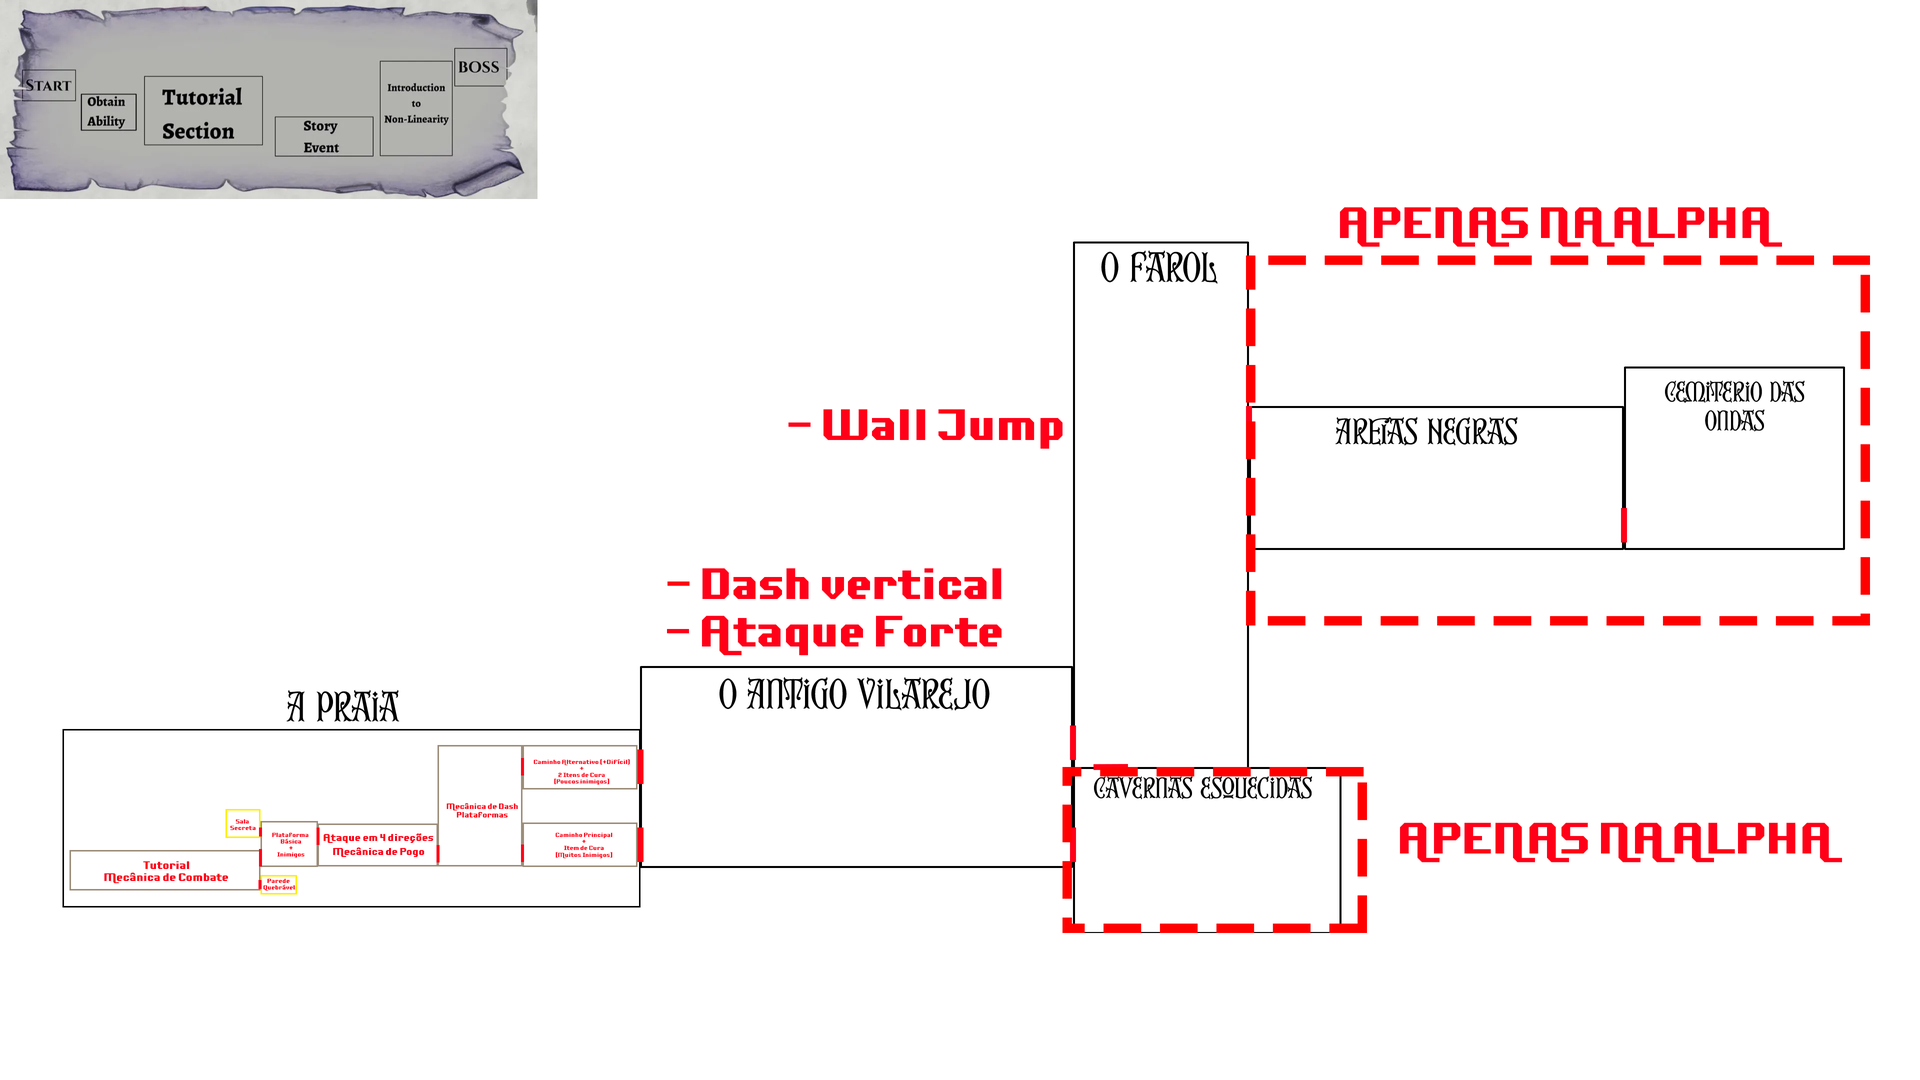
<style>
.page{position:relative;width:1920px;height:1080px;background:#ffffff}
.page>*{position:absolute;margin:0}
.t1{font:39.5px "Adventure-ReQuest";color:#ff0018}
.t2{font:5.5px "Adventure-ReQuest";color:#ff0018}
.t3{font:7px "Adventure-ReQuest";color:#ff0018}
.t4{font:9px "Adventure-ReQuest";color:#ff0018}
.t5{font:10px "Adventure-ReQuest";color:#ff0018}
</style>
<div class="page">
<p class="t1" style="left:1340px;top:207px;width:442px;height:40px">APENAS NA ALPHA</p>
<p class="t1" style="left:788px;top:409px;width:274px;height:40px">- Wall Jump</p>
<p class="t1" style="left:667px;top:568px;width:335px;height:88px;text-align:center">- Dash vertical<br>- Ataque Forte</p>
<p class="t2" style="left:534px;top:759px;width:96px;height:26px;text-align:center">Caminho Alternativo (+Difícil)<br>+<br>2 Itens de Cura<br>[Poucos inimigos]</p>
<p class="t3" style="left:446px;top:803px;width:72px;height:15px;text-align:center">Mecânica de Dash<br>Plataformas</p>
<p class="t2" style="left:230px;top:819px;width:26px;height:11px;text-align:center">Sala <br>Secreta</p>
<p class="t2" style="left:272px;top:832px;width:36px;height:26px;text-align:center">Plataforma <br>Básica<br>+<br>Inimigos</p>
<p class="t4" style="left:324px;top:834px;width:110px;height:9px">Ataque em 4 direções</p>
<p class="t2" style="left:556px;top:832px;width:56px;height:26px;text-align:center">Caminho Principal<br>+<br>Item de Cura<br>[Muitos Inimigos]</p>
<p class="t1" style="left:1400px;top:822px;width:442px;height:40px">APENAS NA ALPHA</p>
<p class="t4" style="left:333px;top:848px;width:91px;height:9px">Mecânica de Pogo</p>
<p class="t5" style="left:104px;top:861px;width:124px;height:23px;text-align:center">Tutorial<br>Mecânica de Combate</p>
<p class="t2" style="left:264px;top:878px;width:31px;height:13px;text-align:center">Parede <br>Quebrável</p>
</div>
